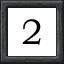
<style>
.page{position:relative;width:64px;height:64px;background:#ffffff}
.page>*{position:absolute;margin:0}
.t1{font:36px "BookmanOldStyle";color:#000000}
</style>
<div class="page">
<p class="t1" style="left:22px;top:19px;width:19px;height:26px">2</p>
</div>
